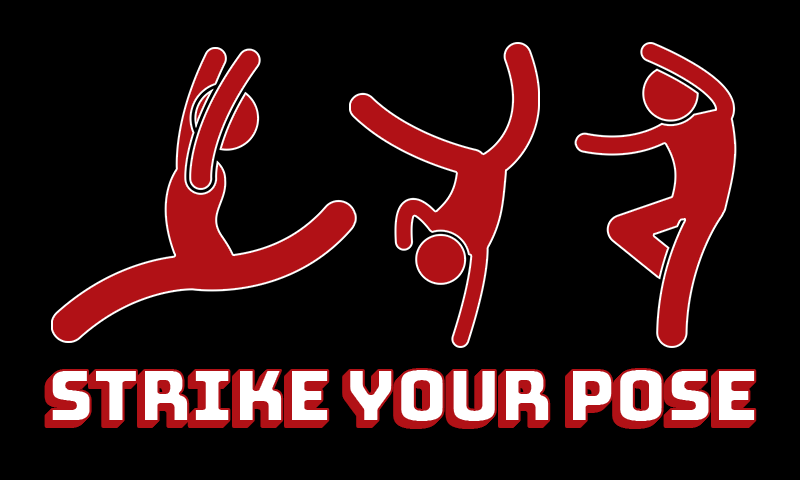
<style>
.page{position:relative;width:800px;height:480px;background:#000000}
.page>*{position:absolute;margin:0}
.t1{font:73px "Bungee-Regular";letter-spacing:-0.025em}
.t2{font:73px "Bungee-Regular";letter-spacing:-0.025em;color:#ffffff}
</style>
<div class="page">
<p class="t1" style="left:44px;top:374px;width:707px;height:55px">Strike your pose</p>
<p class="t1" style="left:45px;top:373px;width:707px;height:55px">Strike your pose</p>
<p class="t1" style="left:46px;top:372px;width:707px;height:55px">Strike your pose</p>
<p class="t1" style="left:47px;top:371px;width:707px;height:55px">Strike your pose</p>
<p class="t2" style="left:48px;top:370px;width:707px;height:55px">Strike your pose</p>
<p class="t2" style="left:49px;top:369px;width:707px;height:55px">Strike your pose</p>
<p class="t2" style="left:50px;top:368px;width:707px;height:55px">Strike your pose</p>
</div>
